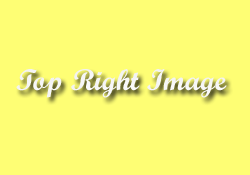
<style>
.page{position:relative;width:250px;height:175px;background:#fefe74}
.page>*{position:absolute;margin:0}
.t1{font:30px "ScriptMTBold";color:#ffffff}
</style>
<div class="page">
<p class="t1" style="left:16px;top:69px;width:211px;height:29px">Top Right Image</p>
</div>
